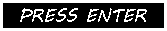
<style>
.page{position:relative;width:167px;height:31px;background:#000000}
.page>*{position:absolute;margin:0}
.t1{font:18px "MVBoli";color:#ffffff}
</style>
<div class="page">
<p class="t1" style="left:20px;top:8px;width:127px;height:14px">PRESS ENTER</p>
</div>
